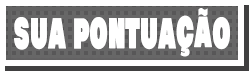
<style>
.page{position:relative;width:249px;height:71px;background:#ffffff}
.page>*{position:absolute;margin:0}
.t1{font:36px "RaglanPunchStd-UB";letter-spacing:0.016em;color:#ffffff;scale:0.56 1}
</style>
<div class="page">
<p class="t1" style="left:14px;top:8px;width:216px;height:49px">SUA PONTUAÇÃO</p>
</div>
